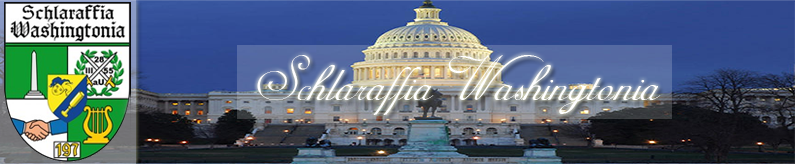
<style>
.page{position:relative;width:795px;height:164px}
.page>*{position:absolute;margin:0}
.t1{font:72px "AdineKirnberg-Regular";color:#ffffff}
</style>
<div class="page">
<p class="t1" style="left:257px;top:55px;width:404px;height:60px">Schlaraffia Washingtonia</p>
</div>
